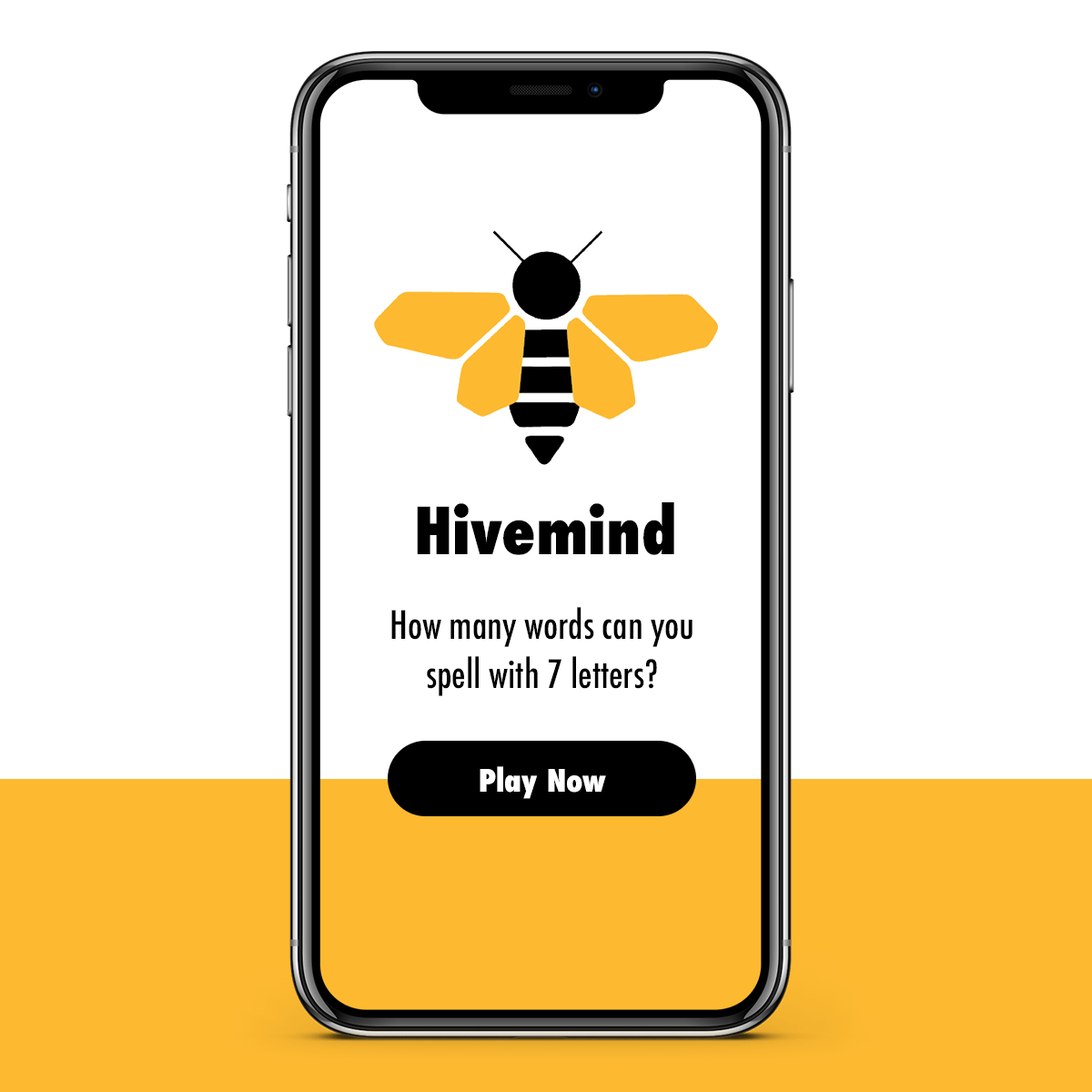
<style>
.page{position:relative;width:1092px;height:1092px;background:#ffffff}
.page>*{position:absolute;margin:0}
.t1{font:63px "Futura-CondensedExtraBold";color:#000000}
.t2{font:37.9px/49.3px "Futura-CondensedMedium";color:#000000}
.t3{font:30.3px "Futura-CondensedExtraBold";color:#ffffff}
</style>
<div class="page">
<p class="t1" style="left:417px;top:502px;width:257px;height:53px">Hivemind</p>
<p class="t2" style="left:391px;top:607px;width:302px;height:89px;text-align:center">How many words can you <br>spell with 7 letters?</p>
<p class="t3" style="left:480px;top:766px;width:126px;height:33px">Play Now</p>
</div>
